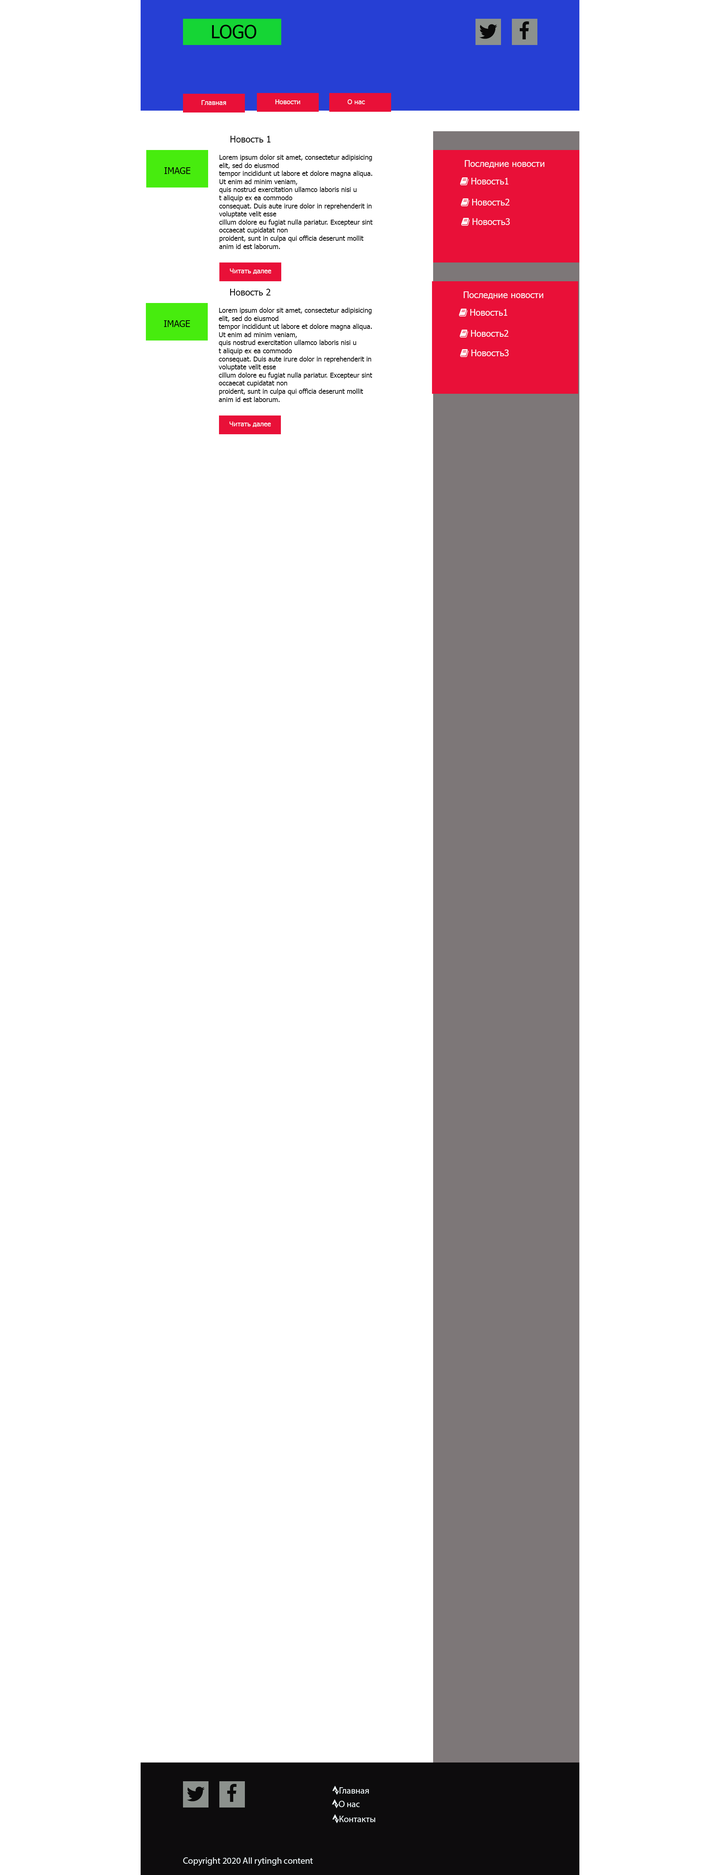
<style>
.page{position:relative;width:720px;height:1875px;background:#ffffff}
.page>*{position:absolute;margin:0}
.t1{font:18px "Tahoma";color:#000000}
.t2{font:6.8px "Tahoma";color:#fafafa}
.t3{font:9px "Tahoma";color:#000000}
.t4{font:6.8px "Tahoma";color:#030303}
.t5{font:9px "Tahoma";color:#fdfafb}
.t6{font:9px "Tahoma";color:#030303}
.t7{font:6.8px "Tahoma";color:#fcfafa}
.t8{font:9px "Tahoma";color:#ecf3f5}
</style>
<div class="page">
<p class="t1" style="left:212px;top:25px;width:44px;height:14px">LOGO</p>
<p class="t2" style="left:201px;top:100px;width:25px;height:5px">Главная</p>
<p class="t2" style="left:275px;top:99px;width:25px;height:5px">Новости</p>
<p class="t2" style="left:348px;top:99px;width:17px;height:5px">О нас</p>
<p class="t3" style="left:230px;top:136px;width:41px;height:6px">Новость 1</p>
<p class="t4" style="left:219px;top:154px;width:154px;height:95px">Lorem ipsum dolor sit amet, consectetur adipisicing <br>elit, sed do eiusmod<br>tempor incididunt ut labore et dolore magna aliqua. <br>Ut enim ad minim veniam,<br>quis nostrud exercitation ullamco laboris nisi u<br>t aliquip ex ea commodo<br>consequat. Duis aute irure dolor in reprehenderit in <br>voluptate velit esse<br>cillum dolore eu fugiat nulla pariatur. Excepteur sint <br>occaecat cupidatat non<br>proident, sunt in culpa qui officia deserunt mollit <br>anim id est laborum.</p>
<p class="t5" style="left:465px;top:160px;width:79px;height:8px">Последние новости</p>
<p class="t6" style="left:164px;top:167px;width:26px;height:7px">IMAGE</p>
<p class="t5" style="left:471px;top:178px;width:37px;height:6px">Новость 1</p>
<p class="t5" style="left:472px;top:199px;width:38px;height:7px">Новость 2</p>
<p class="t5" style="left:472px;top:218px;width:38px;height:7px">Новость 3</p>
<p class="t7" style="left:230px;top:268px;width:42px;height:6px">Читать далее</p>
<p class="t3" style="left:230px;top:289px;width:41px;height:7px">Новость 2</p>
<p class="t5" style="left:464px;top:291px;width:79px;height:8px">Последние новости</p>
<p class="t4" style="left:219px;top:308px;width:153px;height:94px">Lorem ipsum dolor sit amet, consectetur adipisicing <br>elit, sed do eiusmod<br>tempor incididunt ut labore et dolore magna aliqua. <br>Ut enim ad minim veniam,<br>quis nostrud exercitation ullamco laboris nisi u<br>t aliquip ex ea commodo<br>consequat. Duis aute irure dolor in reprehenderit in <br>voluptate velit esse<br>cillum dolore eu fugiat nulla pariatur. Excepteur sint <br>occaecat cupidatat non<br>proident, sunt in culpa qui officia deserunt mollit <br>anim id est laborum.</p>
<p class="t5" style="left:470px;top:309px;width:37px;height:7px">Новость 1</p>
<p class="t6" style="left:164px;top:320px;width:26px;height:7px">IMAGE</p>
<p class="t5" style="left:471px;top:330px;width:37px;height:7px">Новость 2</p>
<p class="t5" style="left:471px;top:350px;width:38px;height:6px">Новость 3</p>
<p class="t7" style="left:230px;top:422px;width:41px;height:5px">Читать далее</p>
<p class="t8" style="left:183px;top:1857px;width:130px;height:9px">Copyright 2020 All rytingh content</p>
</div>
